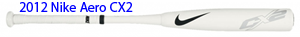
<style>
.page{position:relative;width:300px;height:37px;background:#fefefe}
.page>*{position:absolute;margin:0}
.t1{font:14px "MyriadPro-Regular";color:#0000ff}
</style>
<div class="page">
<p class="t1" style="left:19px;top:2px;width:114px;height:10px">2012 Nike Aero CX2</p>
</div>
